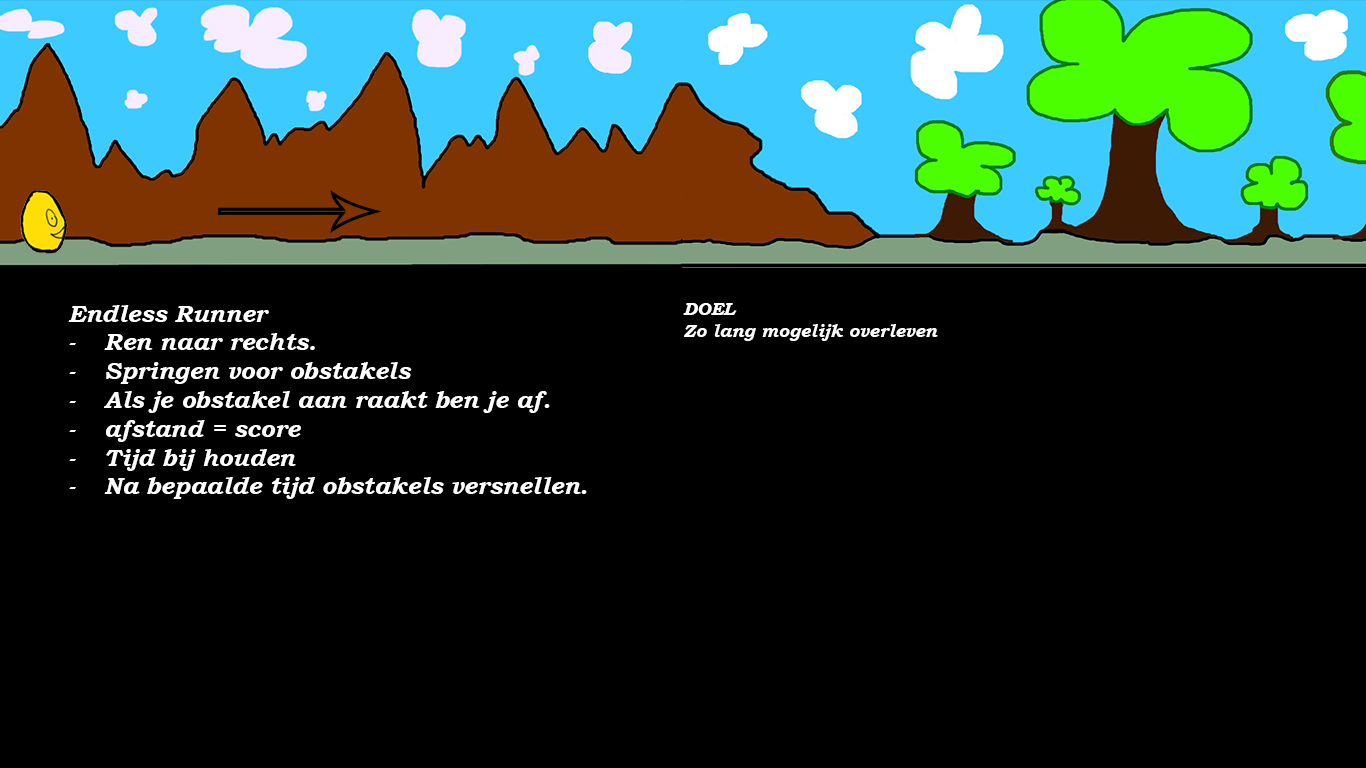
<style>
.page{position:relative;width:1366px;height:768px;background:#000000}
.page>*{position:absolute;margin:0}
.t1{font:24px "BookmanOldStyle-BoldItalic";color:#ffffff}
.t2{font:18px "BookmanOldStyle-BoldItalic";color:#ffffff}
</style>
<div class="page">
<p class="t1" style="left:68px;top:305px;width:519px;height:194px">Endless Runner<br>- Ren naar rechts.<br>- Springen voor obstakels<br>- Als je obstakel aan raakt ben je af.<br>- afstand = score<br>- Tijd bij houden<br>- Na bepaalde tijd obstakels versnellen.</p>
<p class="t2" style="left:683px;top:303px;width:255px;height:38px">DOEL<br>Zo lang mogelijk overleven</p>
</div>
